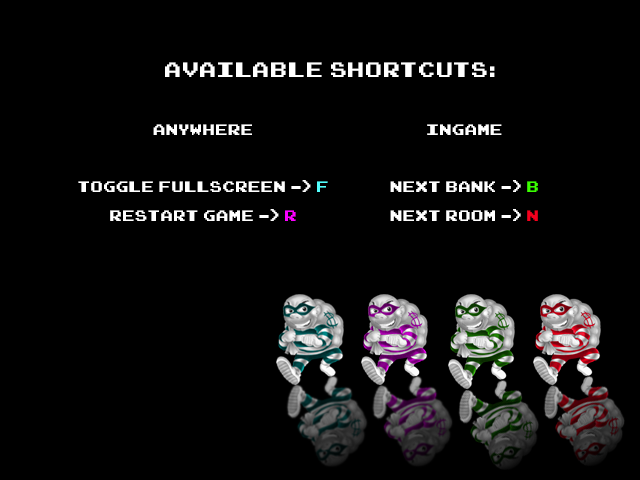
<style>
.page{position:relative;width:640px;height:480px;background:#000000}
.page>*{position:absolute;margin:0}
.t1{font:33.3px "Arcadepix-Plus";color:#ffffff}
.t2{font:24px "Arcadepix-Plus";color:#ffffff}
.t3{font:24px "Arcadepix-Plus";color:#53fffe}
.t4{font:24px "Arcadepix-Plus";color:#fa00ff}
.t5{font:24px "Arcadepix-Plus";color:#3bff00}
.t6{font:24px "Arcadepix-Plus";color:#f5001e}
</style>
<div class="page">
<p class="t1" style="left:165px;top:62px;width:330px;height:15px">AVAILABLE SHORTCUTS:</p>
<p class="t2" style="left:78px;top:124px;width:250px;height:97px;text-align:center">ANYWHERE<br><br>TOGGLE FULLSCREEN -&gt; <span class="t3">F<br></span>RESTART GAME -&gt; <span class="t4">R</span></p>
<p class="t2" style="left:390px;top:124px;width:148px;height:97px;text-align:center">INGAME<br><br>NEXT BANK -&gt; <span class="t5">B<br></span>NEXT ROOM -&gt; <span class="t6">N</span></p>
</div>
